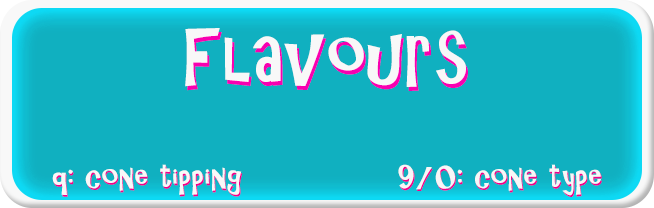
<style>
.page{position:relative;width:654px;height:208px;background:#10b0c0}
.page>*{position:absolute;margin:0}
.t1{font:72px "ARCHRISTY";letter-spacing:0.025em;color:#ffffff}
.t2{font:72px "ARCHRISTY";letter-spacing:0.025em}
.t3{font:30.9px "ARCHRISTY";letter-spacing:0.025em;color:#ffffff}
.t4{font:30.9px "ARCHRISTY";letter-spacing:0.025em}
.t5{font:30.9px "ARCHRISTY";letter-spacing:0.025em;color:#fefefe}
</style>
<div class="page">
<p class="t1" style="left:185px;top:28px;width:281px;height:59px">Flavours</p>
<p class="t2" style="left:187px;top:32px;width:281px;height:59px">Flavours</p>
<p class="t3" style="left:52px;top:164px;width:190px;height:31px">q: cone tipping</p>
<p class="t4" style="left:53px;top:166px;width:190px;height:31px">q: cone tipping</p>
<p class="t5" style="left:398px;top:164px;width:203px;height:32px">9/0: cone type</p>
<p class="t4" style="left:399px;top:166px;width:203px;height:31px">9/0: cone type</p>
</div>
